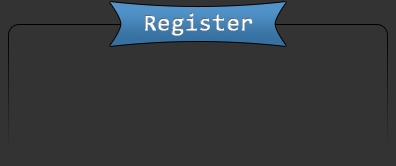
<style>
.page{position:relative;width:396px;height:166px;background:#333333}
.page>*{position:absolute;margin:0}
.t1{font:24px "Consolas";font-weight:bold}
</style>
<div class="page">
<p class="t1" style="left:145px;top:13px;width:108px;height:23px">Register</p>
</div>
